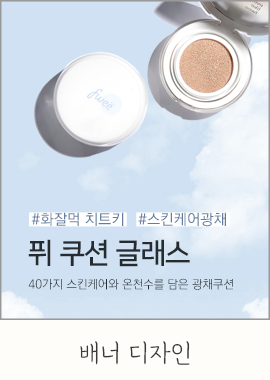
<style>
.page{position:relative;width:270px;height:380px;background:#cfe1f2}
.page>*{position:absolute;margin:0}
.t1{font:15.1px "KoPubWorldDotumMedium";color:#627da1}
.t2{font:28.6px "NanumSquare_acB";color:#252b2f}
.t3{font:12px "KoPubWorldDotumLight";color:#252b2f}
.t4{font:28px "GangwonEduAllLight";color:#393939}
</style>
<div class="page">
<p class="t1" style="left:31px;top:212px;width:195px;height:15px">#화잘먹 치트키   #스킨케어광채</p>
<p class="t2" style="left:28px;top:239px;width:162px;height:28px">퓌 쿠션 글래스</p>
<p class="t3" style="left:28px;top:278px;width:205px;height:12px">40가지 스킨케어와 온천수를 담은 광채쿠션</p>
<p class="t4" style="left:80px;top:341px;width:110px;height:24px">배너 디자인</p>
</div>
